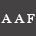
<style>
.page{position:relative;width:36px;height:36px;background:#444243}
.page>*{position:absolute;margin:0}
.t1{font:13.9px "BaskOldFace";color:#ffffff}
</style>
<div class="page">
<p class="t1" style="left:1px;top:14px;width:11px;height:9px">A</p>
<p class="t1" style="left:14px;top:14px;width:11px;height:9px">A</p>
<p class="t1" style="left:27px;top:14px;width:8px;height:9px">F</p>
</div>
